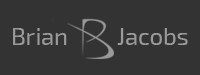
<style>
.page{position:relative;width:200px;height:75px;background:#333333}
.page>*{position:absolute;margin:0}
.t1{font:24px "Exo2-Regular";color:#9a9a9a}
</style>
<div class="page">
<p class="t1" style="left:13px;top:28px;width:54px;height:17px">Brian</p>
<p class="t1" style="left:117px;top:28px;width:71px;height:17px">Jacobs</p>
</div>
